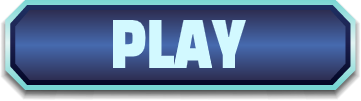
<style>
.page{position:relative;width:361px;height:101px}
.page>*{position:absolute;margin:0}
.t1{font:64px "BlackHanSans-Regular";color:#d2f9ff;scale:0.8 1}
</style>
<div class="page">
<p class="t1" style="left:113px;top:19px;width:134px;height:49px">PLAY</p>
</div>
